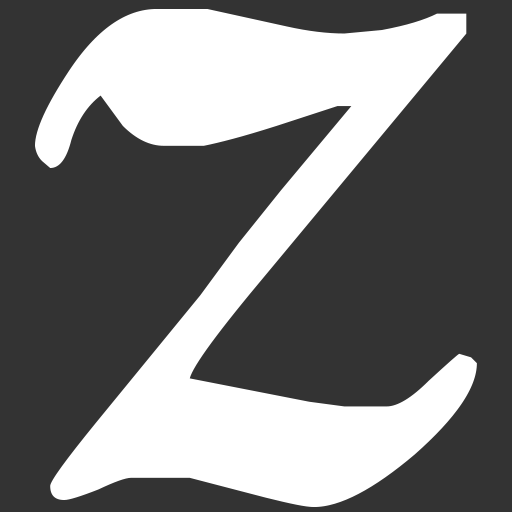
<style>
.page{position:relative;width:512px;height:512px;background:#333333}
.page>*{position:absolute;margin:0}
.t1{font:1169.3px "Augusta-Regular";color:#ffffff}
</style>
<div class="page">
<p class="t1" style="left:35px;top:9px;width:442px;height:498px">z</p>
</div>
